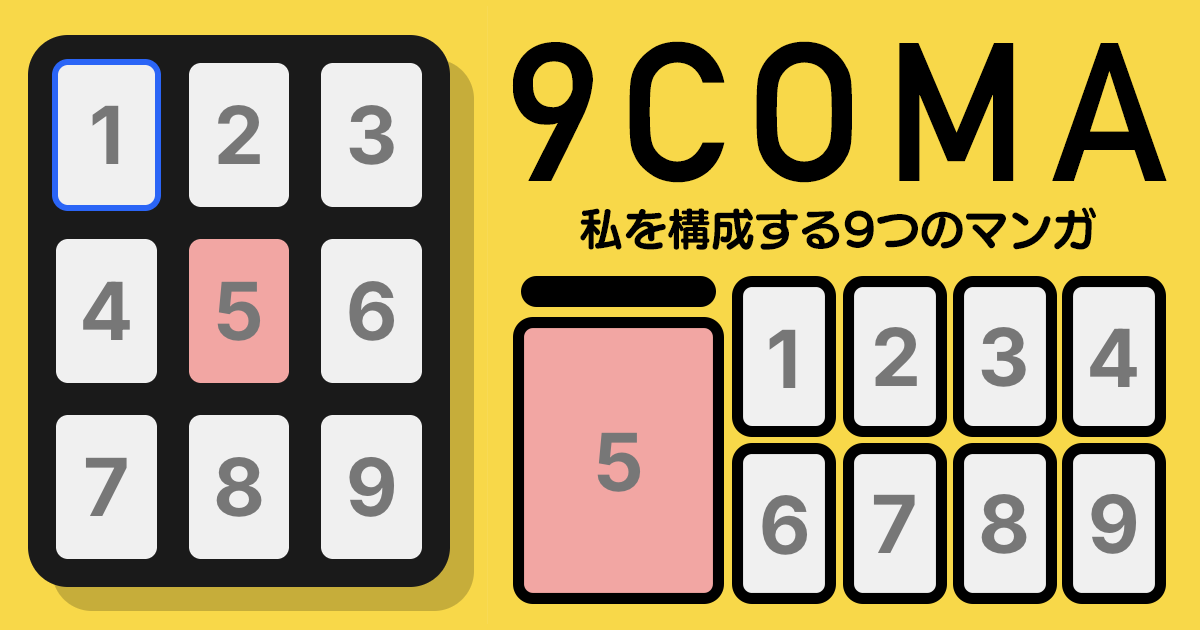
<style>
.page{position:relative;width:1200px;height:630px;background:#f8d849}
.page>*{position:absolute;margin:0}
.t1{font:194px "DINAlternate-Bold";letter-spacing:0.1em;color:#000000}
.t2{font:44px "UDMarugo_LargePr6N-B";color:#000000}
</style>
<div class="page">
<p class="t1" style="left:512px;top:41px;width:655px;height:142px">9COMA</p>
<p class="t2" style="left:580px;top:207px;width:516px;height:43px">私を構成する9つのマンガ</p>
</div>
